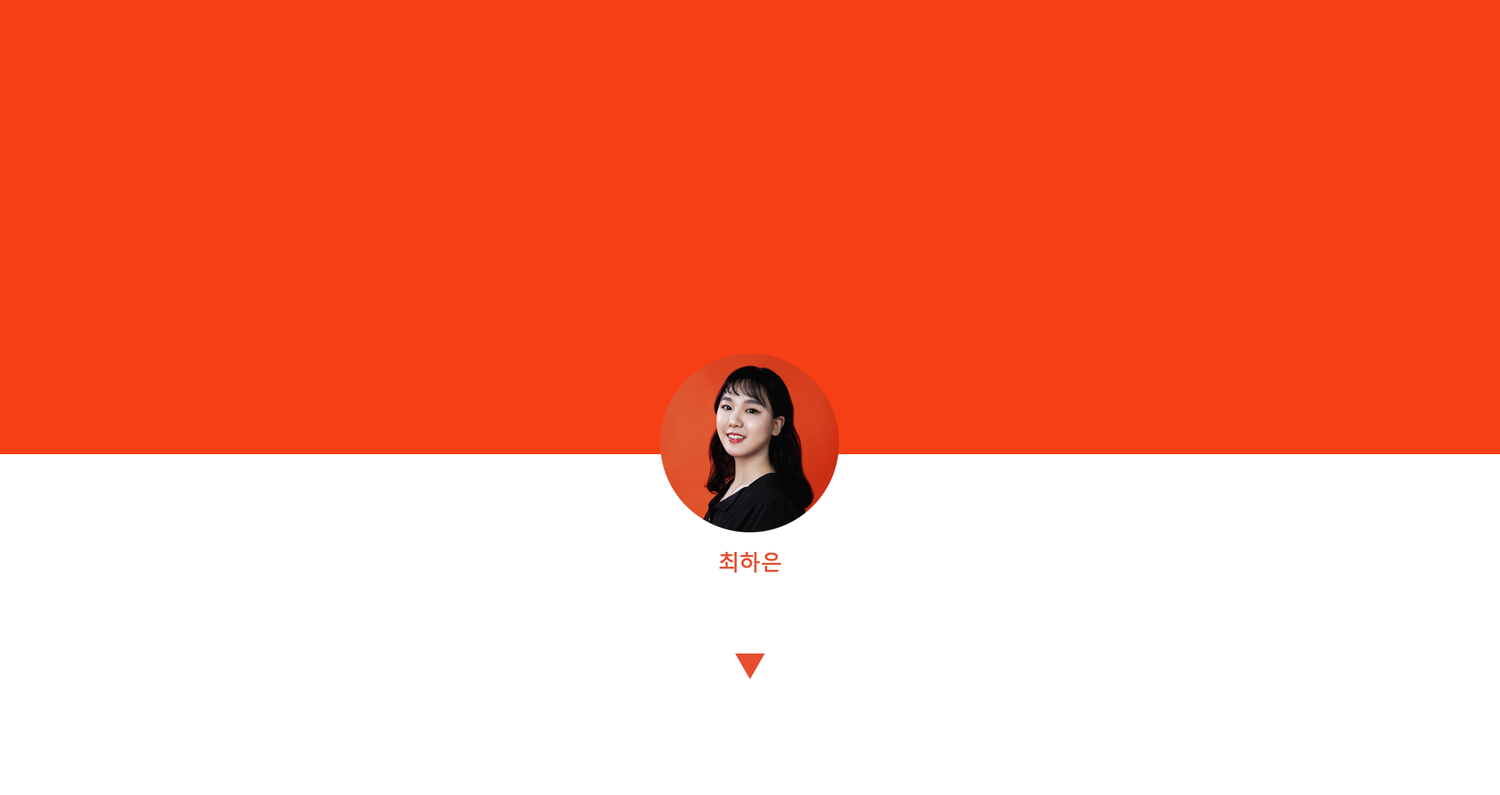
<style>
.page{position:relative;width:1500px;height:795px;background:#f63f14}
.page>*{position:absolute;margin:0}
.t1{font:20.8px "MalgunGothic";color:#e54e2f;font-weight:bold}
</style>
<div class="page">
<p class="t1" style="left:719px;top:552px;width:62px;height:21px">최하은</p>
</div>
